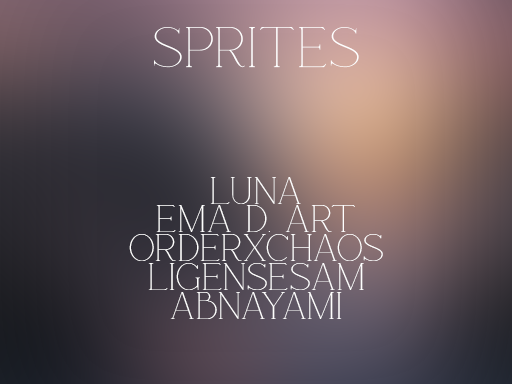
<style>
.page{position:relative;width:512px;height:384px}
.page>*{position:absolute;margin:0}
.t1{font:49.8px "Rotten";color:#ffffff;scale:0.96 1}
.t2{font:33.7px/28.8px "Rotten";color:#ffffff;scale:0.96 1}
</style>
<div class="page">
<p class="t1" style="left:154px;top:27px;width:205px;height:41px">SPRITES</p>
<p class="t2" style="left:129px;top:177px;width:254px;height:142px;text-align:center">Luna<br>Ema d. art<br>ORDERXCHAOS<br>LIGENSESAM<br>ABNAYAMI</p>
</div>
